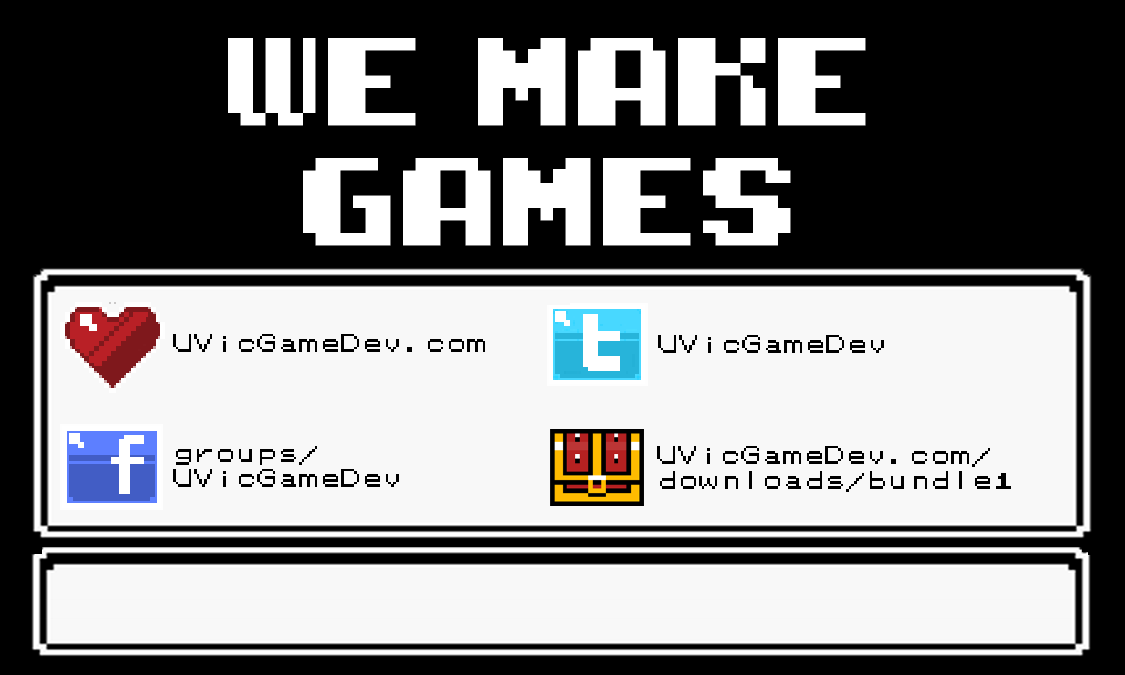
<style>
.page{position:relative;width:1125px;height:675px;background:#000000}
.page>*{position:absolute;margin:0}
.t1{font:100px "G7-Star-Force-TTF";color:#ffffff}
.t2{font:20.8px "PokemonGB";color:#000000}
</style>
<div class="page">
<p class="t1" style="left:228px;top:38px;width:638px;height:208px;text-align:center">WE MAKE GAMES</p>
<p class="t2" style="left:173px;top:334px;width:312px;height:18px">UVicGameDev.com</p>
<p class="t2" style="left:658px;top:335px;width:226px;height:18px">UVicGameDev</p>
<p class="t2" style="left:173px;top:446px;width:226px;height:41px">groups/<br>UVicGameDev</p>
<p class="t2" style="left:657px;top:446px;width:354px;height:46px">UVicGameDev.com/<br>downloads/bundle1</p>
</div>
